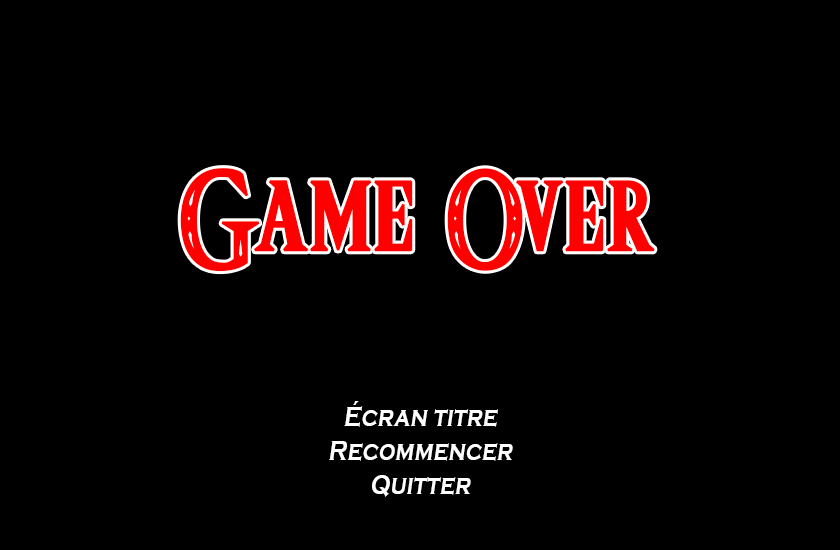
<style>
.page{position:relative;width:840px;height:550px;background:#000000}
.page>*{position:absolute;margin:0}
.t1{font:113.1px "Triforce";color:#ff0000;font-weight:bold;scale:0.9 1}
.t2{font:28.6px "CopperplateGothic-Bold";color:#ffffff;font-style:italic;scale:0.81 1}
</style>
<div class="page">
<p class="t1" style="left:180px;top:168px;width:475px;height:104px">Game Over</p>
<p class="t2" style="left:329px;top:401px;width:184px;height:96px;text-align:center">Écran titre<br>Recommencer<br>Quitter</p>
</div>
